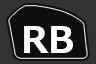
<style>
.page{position:relative;width:96px;height:64px;background:#0c0e0f}
.page>*{position:absolute;margin:0}
.t1{font:36px "Meiryo-Bold";color:#ffffff}
</style>
<div class="page">
<p class="t1" style="left:24px;top:26px;width:49px;height:27px">RB</p>
</div>
